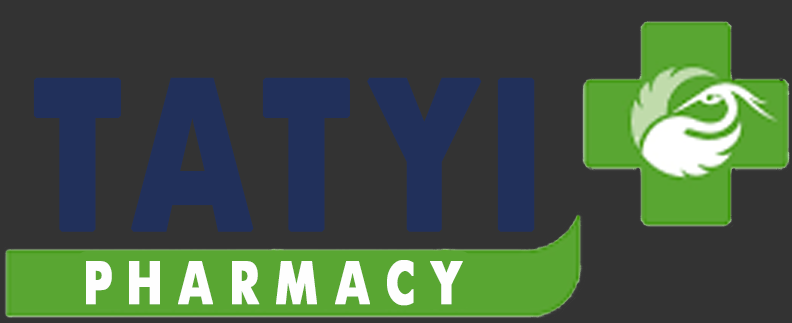
<style>
.page{position:relative;width:792px;height:323px;background:#333333}
.page>*{position:absolute;margin:0}
.t1{font:192.5px "a-bug's-life---debugged-Regular";letter-spacing:0.075em;color:#21305b;font-weight:bold;scale:0.91 1}
.t2{font:55px "a-bug's-life---debugged-Regular";letter-spacing:0.3em;color:#fefefe;font-weight:bold;scale:0.91 1}
</style>
<div class="page">
<p class="t1" style="left:33px;top:77px;width:502px;height:155px">TATYI</p>
<p class="t2" style="left:86px;top:260px;width:377px;height:46px">PHARMACY</p>
</div>
